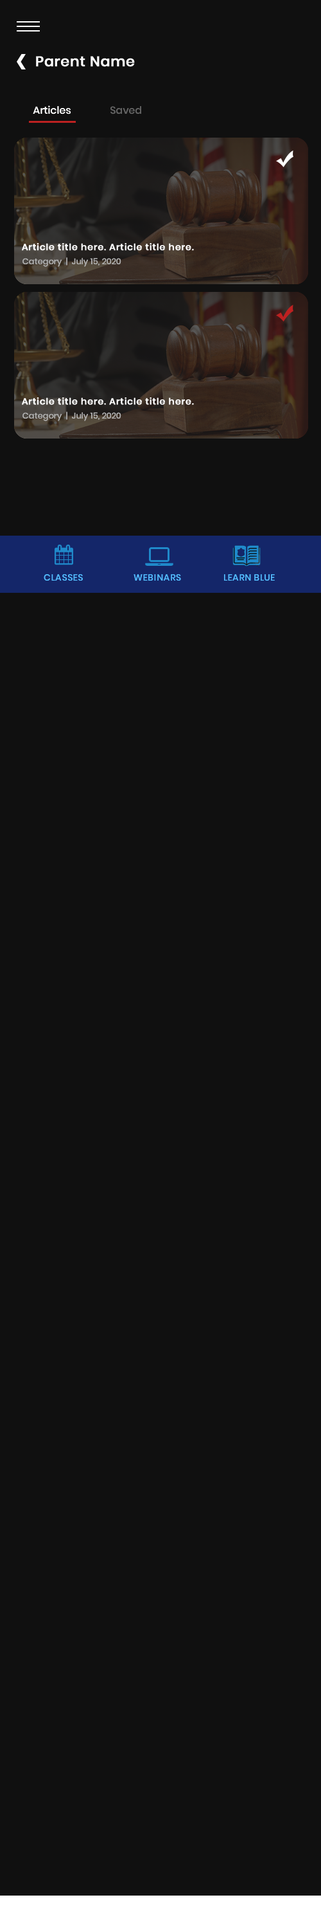
<style>
.page{position:relative;width:321px;height:1929px;background:#101010}
.page>*{position:absolute;margin:0}
.t1{font:14.1px "Poppins-Medium";color:#ffffff;font-weight:bold}
.t2{font:10.3px "Poppins-Medium";color:#ffffff}
.t3{font:10.3px "Poppins-Medium";color:#636363}
.t4{font:9px "Poppins-Medium";color:#ffffff;font-weight:bold}
.t5{font:8.4px "Poppins-Medium";color:#b1b1b1}
.t6{font:9px "Poppins-Medium";letter-spacing:0.04em;color:#53bdff;text-transform:uppercase}
</style>
<div class="page">
<p class="t1" style="left:36px;top:56px;width:99px;height:11px">Parent Name</p>
<p class="t2" style="left:33px;top:105px;width:38px;height:9px">Articles</p>
<p class="t3" style="left:111px;top:106px;width:30px;height:8px">Saved</p>
<p class="t4" style="left:22px;top:243px;width:172px;height:8px">Article title here. Article title here.</p>
<p class="t5" style="left:22px;top:257px;width:100px;height:10px">Category  |  July 15, 2020</p>
<p class="t4" style="left:22px;top:397px;width:172px;height:8px">Article title here. Article title here.</p>
<p class="t5" style="left:22px;top:411px;width:100px;height:10px">Category  |  July 15, 2020</p>
<p class="t6" style="left:44px;top:574px;width:39px;height:6px">classes</p>
<p class="t6" style="left:134px;top:574px;width:47px;height:6px">webinars</p>
<p class="t6" style="left:224px;top:574px;width:51px;height:6px">learn blue</p>
</div>
